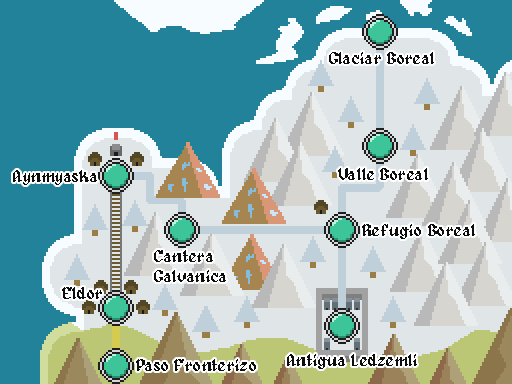
<style>
.page{position:relative;width:512px;height:384px;background:#218299}
.page>*{position:absolute;margin:0}
.t1{font:16.7px "Alagard";color:#0d0d0d}
</style>
<div class="page">
<p class="t1" style="left:329px;top:52px;width:105px;height:12px">Glaciar Boreal</p>
<p class="t1" style="left:13px;top:170px;width:84px;height:15px">Aynmyaska</p>
<p class="t1" style="left:338px;top:168px;width:90px;height:12px">Valle Boreal</p>
<p class="t1" style="left:362px;top:224px;width:113px;height:15px">Refugio Boreal</p>
<p class="t1" style="left:154px;top:250px;width:72px;height:32px">Cantera <br>Galvanica</p>
<p class="t1" style="left:62px;top:287px;width:40px;height:12px">Eldor</p>
<p class="t1" style="left:136px;top:359px;width:120px;height:12px">Paso Fronterizo</p>
<p class="t1" style="left:287px;top:354px;width:130px;height:15px">Antigua Ledzemli</p>
</div>
